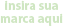
<style>
.page{position:relative;width:63px;height:26px;background:#ffffff}
.page>*{position:absolute;margin:0}
.t1{font:13.1px/13.1px "MyriadPro-Bold";letter-spacing:-0.01em;color:#cfe6c2}
</style>
<div class="page">
<p class="t1" style="left:0px;top:0px;width:63px;height:26px;text-align:center">insira sua<br>marca aqui</p>
</div>
